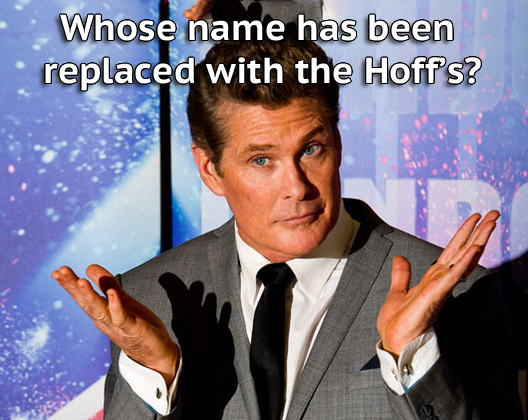
<style>
.page{position:relative;width:528px;height:420px}
.page>*{position:absolute;margin:0}
.t1{font:36px "PTSans-CaptionBold";color:#ffffff}
</style>
<div class="page">
<p class="t1" style="left:45px;top:14px;width:436px;height:77px;text-align:center">Whose name has been <br>replaced with the Hoff’s?</p>
</div>
